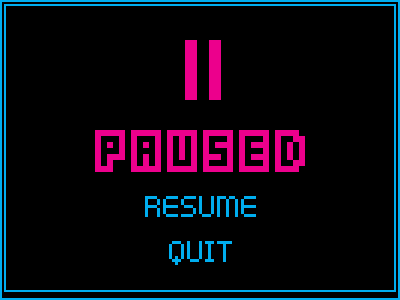
<style>
.page{position:relative;width:400px;height:300px;background:#000000}
.page>*{position:absolute;margin:0}
.t1{font:48px "Kenney-Blocks";color:#ec008c;text-transform:uppercase}
.t2{font:48px "Kenney-Pixel";color:#00aeef;text-transform:uppercase}
.t3{font:48px/45px "Kenney-Pixel";color:#00aeef;text-transform:uppercase}
</style>
<div class="page">
<p class="t1" style="left:95px;top:130px;width:210px;height:42px">paused</p>
<p class="t2" style="left:145px;top:196px;width:111px;height:69px;text-align:center">resume<br><span class="t3">quit</span></p>
</div>
